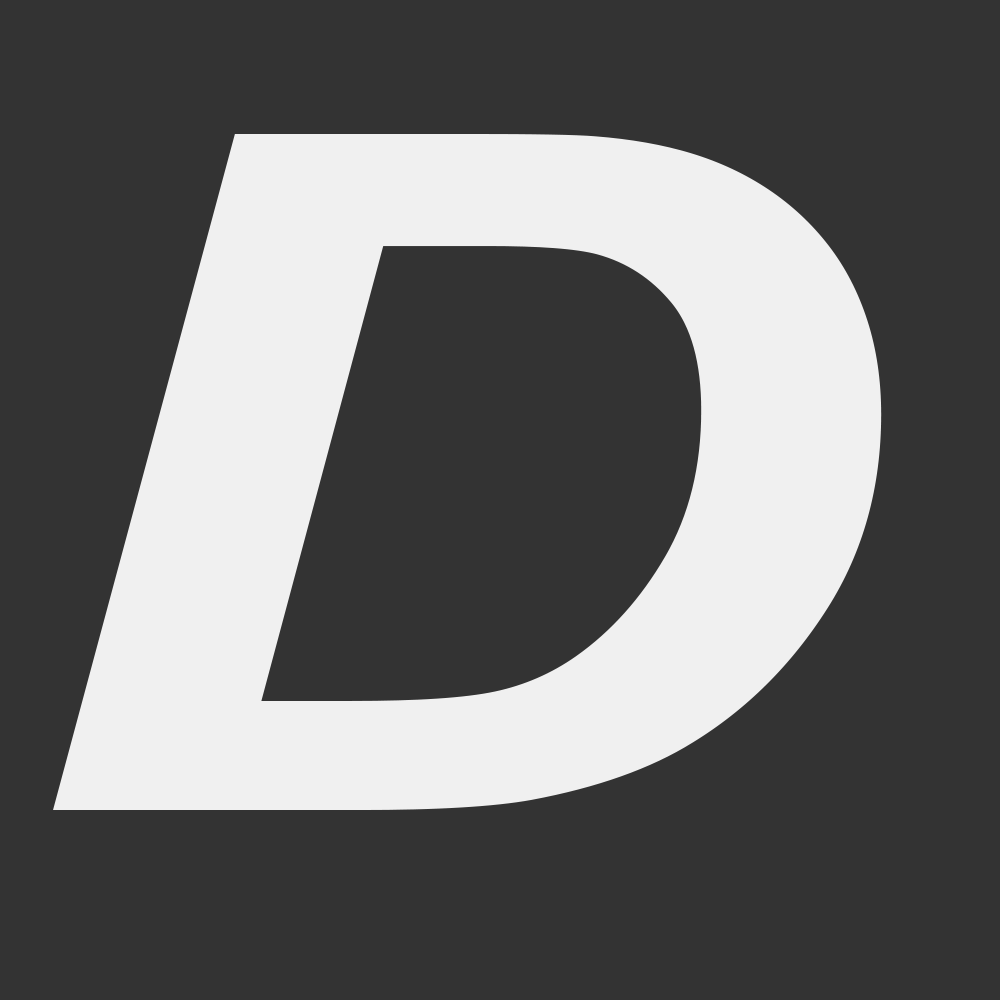
<style>
.page{position:relative;width:1000px;height:1000px;background:#333333}
.page>*{position:absolute;margin:0}
.t1{font:943.9px "Arial-BoldItalicMT";letter-spacing:0.1em;color:#f0f0f0;scale:1.29 1}
</style>
<div class="page">
<p class="t1" style="left:53px;top:134px;width:829px;height:676px">D</p>
</div>
